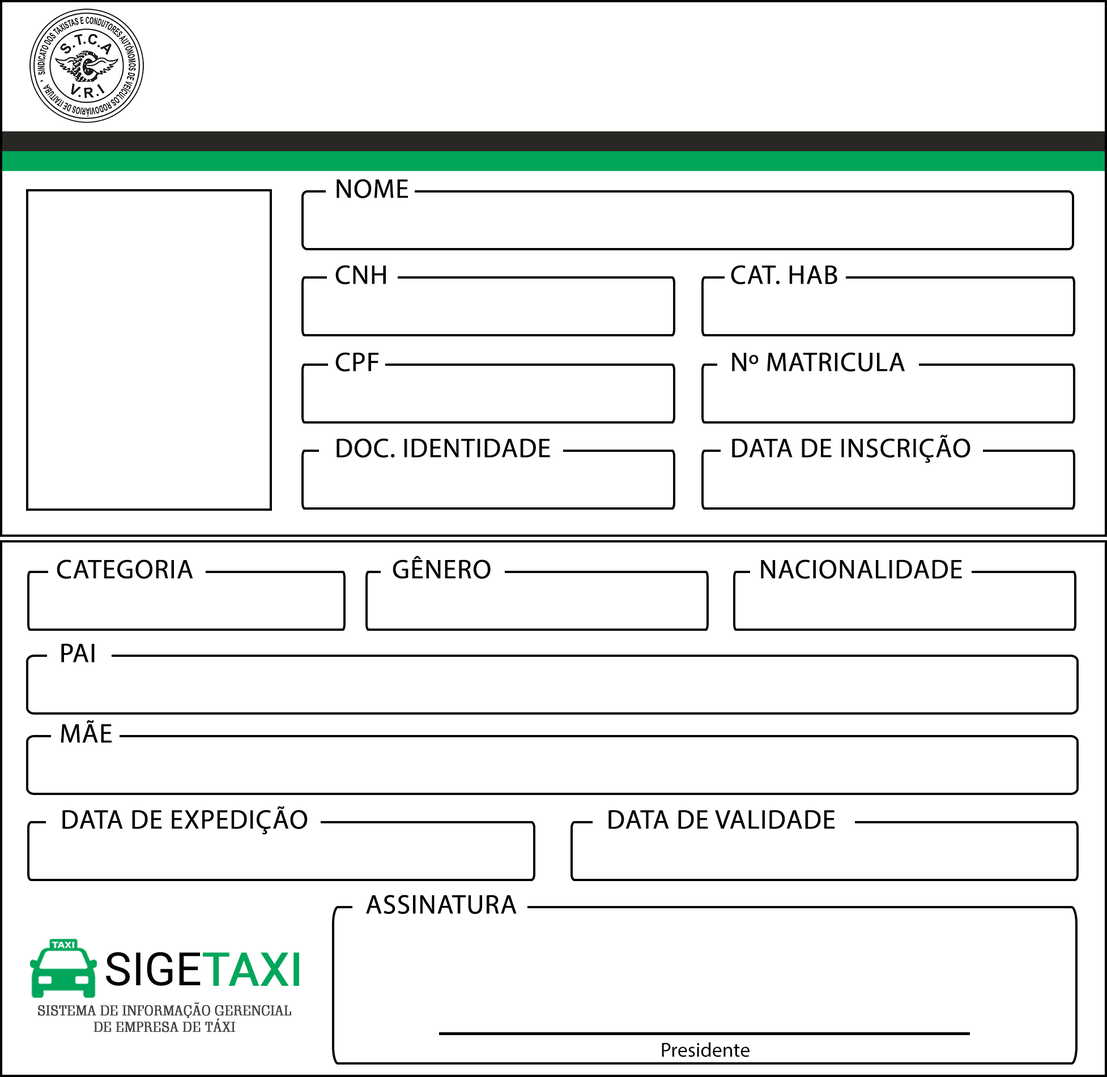
<style>
.page{position:relative;width:1107px;height:1077px;background:#ffffff}
.page>*{position:absolute;margin:0}
.t1{font:27.2px "MyriadPro-Regular";color:#000000;text-transform:uppercase;font-weight:bold}
.t2{font:27.2px "MyriadPro-Regular";color:#000000;font-weight:bold}
.t3{font:20.4px "MyriadPro-Regular";color:#000000}
</style>
<div class="page">
<p class="t1" style="left:336px;top:179px;width:72px;height:19px">Nome</p>
<p class="t2" style="left:335px;top:265px;width:51px;height:19px">CNH</p>
<p class="t2" style="left:731px;top:265px;width:106px;height:19px">CAT. HAB</p>
<p class="t2" style="left:335px;top:352px;width:44px;height:20px">CPF</p>
<p class="t1" style="left:732px;top:352px;width:173px;height:20px">nº mATRICULA</p>
<p class="t1" style="left:732px;top:434px;width:238px;height:29px">DATA DE INSCRIÇÃO</p>
<p class="t2" style="left:336px;top:438px;width:214px;height:20px">DOC. IDENTIDADE</p>
<p class="t2" style="left:393px;top:556px;width:98px;height:23px">GÊNERO</p>
<p class="t1" style="left:57px;top:560px;width:136px;height:19px">Categoria</p>
<p class="t1" style="left:761px;top:560px;width:201px;height:19px">Nacionalidade</p>
<p class="t1" style="left:61px;top:643px;width:34px;height:20px">PAI</p>
<p class="t1" style="left:61px;top:720px;width:51px;height:23px">mÃE</p>
<p class="t2" style="left:62px;top:806px;width:246px;height:29px">DATA DE EXPEDIÇÃO</p>
<p class="t1" style="left:608px;top:810px;width:227px;height:19px">data de validade</p>
<p class="t1" style="left:366px;top:895px;width:151px;height:19px">Assinatura</p>
<p class="t3" style="left:662px;top:1042px;width:87px;height:16px"><span class="t2"><br></span>Presidente</p>
</div>
